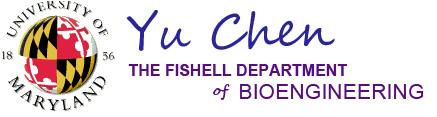
<style>
.page{position:relative;width:437px;height:117px;background:#ffffff}
.page>*{position:absolute;margin:0}
.t1{font:46.6px "SegoeScript";color:#2b259a}
.t2{font:16px "Arial-BoldMT";color:#570e81}
.t3{font:16px "SegoeScript-Bold";color:#570e81}
.t4{font:21.3px "ArialMT";color:#570e81}
</style>
<div class="page">
<p class="t1" style="left:126px;top:10px;width:209px;height:41px;rotate:-1deg">Yu Chen</p>
<p class="t2" style="left:128px;top:64px;width:220px;height:12px">THE FISHELL DEPARTMENT</p>
<p class="t3" style="left:213px;top:84px;width:17px;height:16px">of</p>
<p class="t4" style="left:240px;top:84px;width:184px;height:15px">BIOENGINEERING</p>
</div>
